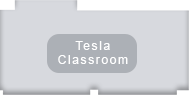
<style>
.page{position:relative;width:189px;height:95px;background:#d7d9de}
.page>*{position:absolute;margin:0}
.t1{font:12px "ArialMT";letter-spacing:0.136em;color:#ffffff}
</style>
<div class="page">
<p class="t1" style="left:58px;top:41px;width:70px;height:23px;text-align:center">Tesla<br>Classroom</p>
</div>
